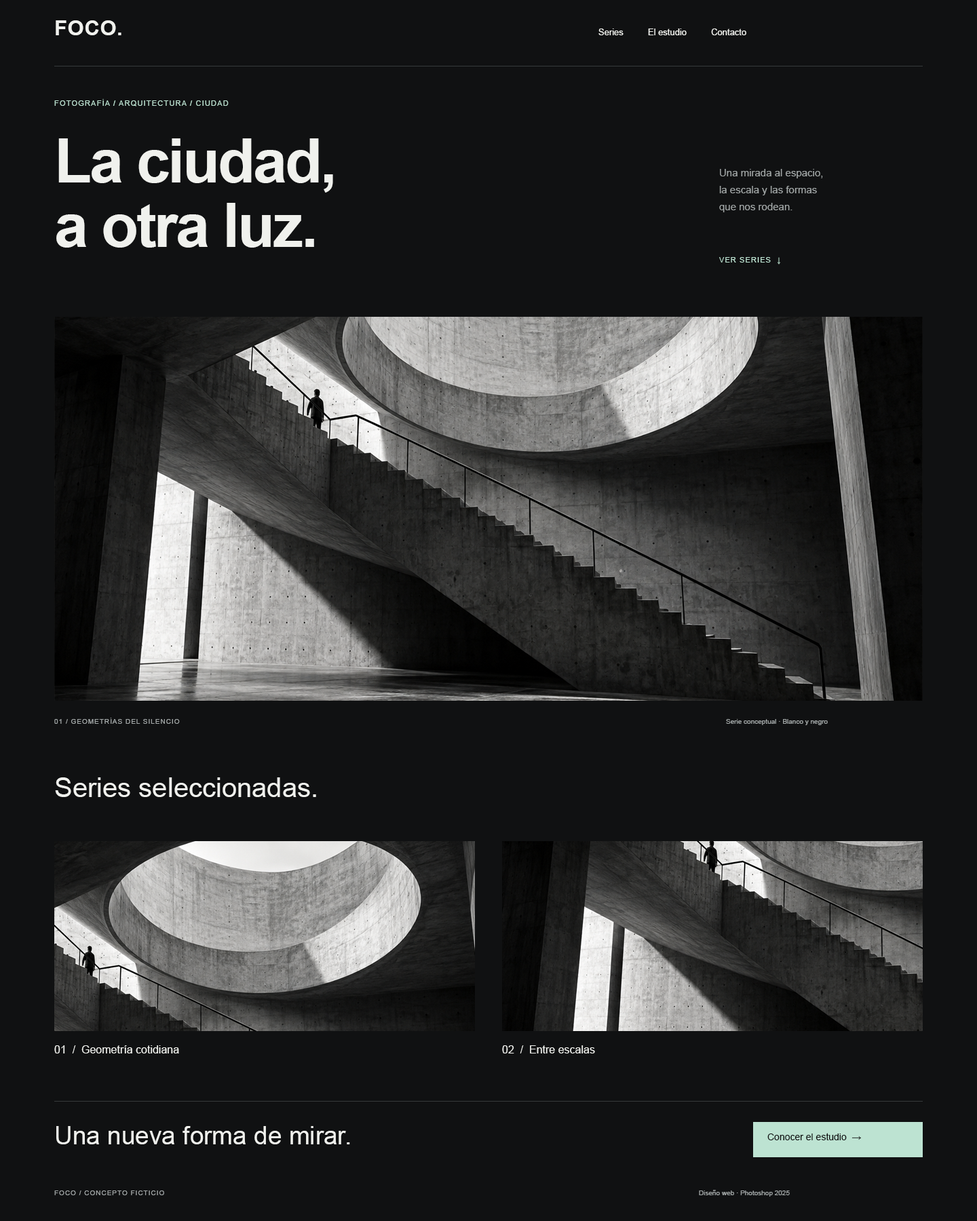
<style>
.page{position:relative;width:977px;height:1221px;background:#101112}
.page>*{position:absolute;margin:0}
.t1{font:21px "Arial-BoldMT";letter-spacing:0.02em;color:#f0f1ed}
.t2{font:8.8px "ArialMT";color:#f0f1ed}
.t3{font:7.5px "ArialMT";letter-spacing:0.11em;color:#bde3d2}
.t4{font:61px/64.4px "Arial-BoldMT";letter-spacing:-0.035em;color:#f0f1ed}
.t5{font:10.2px/17px "ArialMT";color:#a2a7a7}
.t6{font:7.5px "ArialMT";letter-spacing:0.1em;color:#bde3d2}
.t7{font:6.8px "ArialMT";letter-spacing:0.1em;color:#a2a7a7}
.t8{font:6.8px "ArialMT";color:#a2a7a7}
.t9{font:27.1px "ArialMT";color:#f0f1ed}
.t10{font:10.9px "ArialMT";color:#f0f1ed}
.t11{font:25.1px "ArialMT";color:#f0f1ed}
.t12{font:9.5px "ArialMT";color:#101112}
</style>
<div class="page">
<p class="t1" style="left:56px;top:20px;width:65px;height:15px">FOCO.</p>
<p class="t2" style="left:598px;top:28px;width:148px;height:7px">Series          El estudio          Contacto</p>
<p class="t3" style="left:54px;top:99px;width:175px;height:7px">FOTOGRAFÍA / ARQUITECTURA / CIUDAD</p>
<p class="t4" style="left:56px;top:138px;width:277px;height:110px">La ciudad,<br>a otra luz.</p>
<p class="t5" style="left:719px;top:169px;width:104px;height:43px">Una mirada al espacio,<br>la escala y las formas<br>que nos rodean.</p>
<p class="t6" style="left:719px;top:257px;width:61px;height:8px">VER SERIES  ↓</p>
<p class="t7" style="left:54px;top:718px;width:126px;height:6px">01 / GEOMETRÍAS DEL SILENCIO</p>
<p class="t8" style="left:726px;top:719px;width:101px;height:6px">Serie conceptual · Blanco y negro</p>
<p class="t9" style="left:55px;top:777px;width:261px;height:20px">Series seleccionadas.</p>
<p class="t10" style="left:54px;top:1045px;width:125px;height:8px">01  /  Geometría cotidiana</p>
<p class="t10" style="left:502px;top:1045px;width:93px;height:8px">02  /  Entre escalas</p>
<p class="t11" style="left:56px;top:1126px;width:294px;height:18px">Una nueva forma de mirar.</p>
<p class="t12" style="left:767px;top:1133px;width:94px;height:7px">Conocer el estudio  →</p>
<p class="t7" style="left:54px;top:1190px;width:110px;height:5px">FOCO / CONCEPTO FICTICIO</p>
<p class="t8" style="left:699px;top:1190px;width:91px;height:6px">Diseño web · Photoshop 2025</p>
</div>
